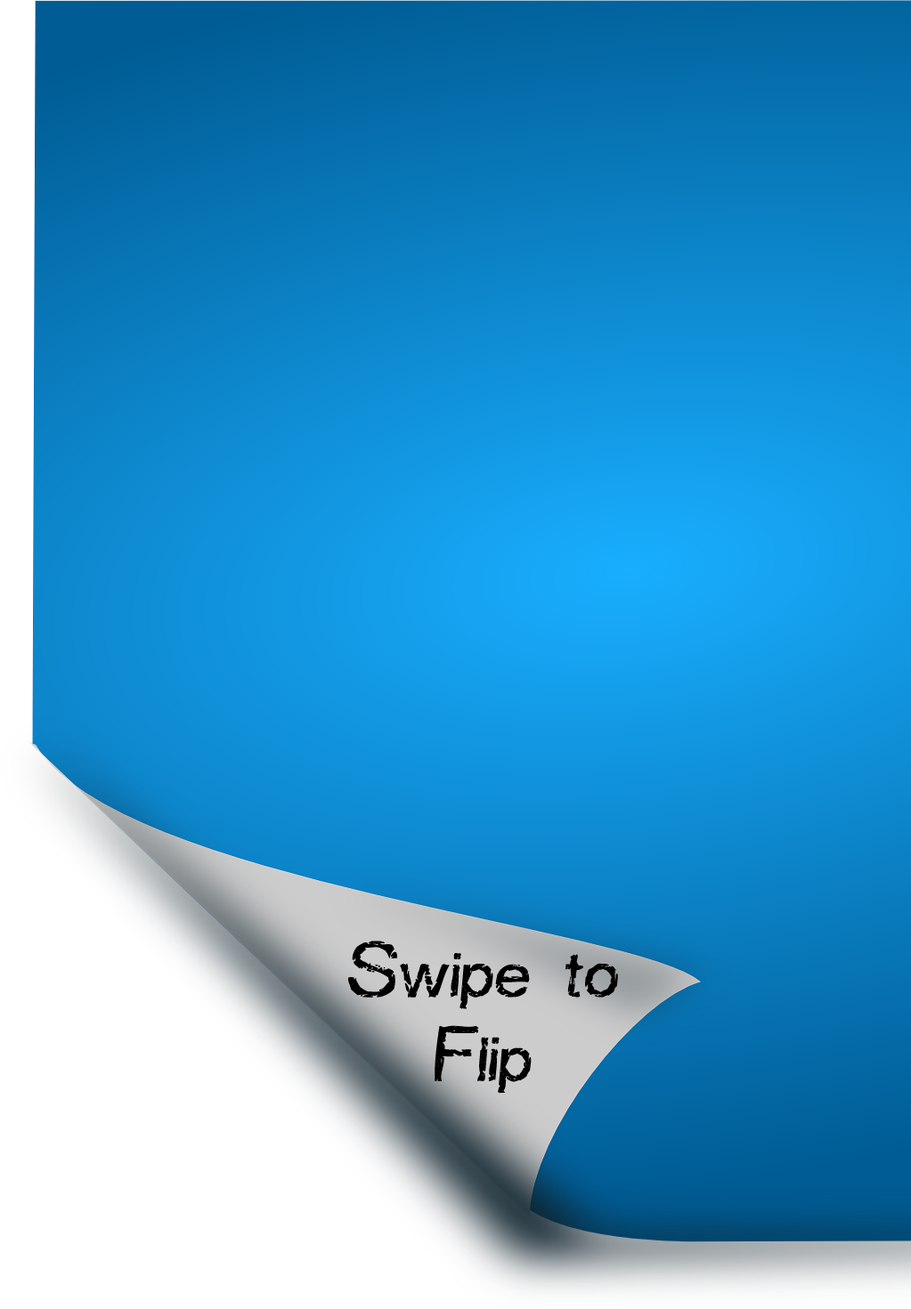
<style>
.page{position:relative;width:911px;height:1309px}
.page>*{position:absolute;margin:0}
.t1{font:70.3px "CarbonizedTimber";color:#000000}
</style>
<div class="page">
<p class="t1" style="left:348px;top:941px;width:270px;height:153px;text-align:center">Swipe to Flip</p>
</div>
